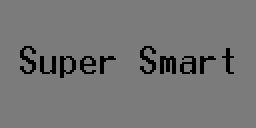
<style>
.page{position:relative;width:256px;height:128px;background:#7b7b7b}
.page>*{position:absolute;margin:0}
.t1{font:36px "Terminal";color:#000000}
</style>
<div class="page">
<p class="t1" style="left:20px;top:46px;width:214px;height:32px">Super Smart</p>
</div>
